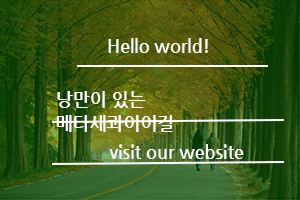
<style>
.page{position:relative;width:300px;height:200px}
.page>*{position:absolute;margin:0}
.t1{font:18px "NanumGothicBold";color:#ffffff}
.t2{font:18px/24px "NanumGothicBold";color:#ffffff}
</style>
<div class="page">
<p class="t1" style="left:108px;top:38px;width:100px;height:15px">Hello world!</p>
<p class="t2" style="left:56px;top:91px;width:117px;height:41px">낭만이 있는<br>메타세콰이어길</p>
<p class="t1" style="left:109px;top:144px;width:135px;height:15px">visit our website</p>
</div>
